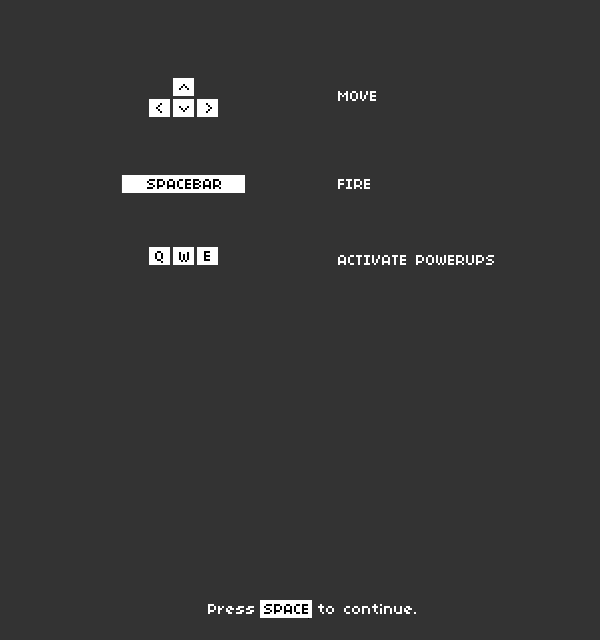
<style>
.page{position:relative;width:600px;height:640px;background:#333333}
.page>*{position:absolute;margin:0}
.t1{font:16px "04b03";color:#000000}
.t2{font:16px "04b03";color:#ffffff}
</style>
<div class="page">
<p class="t1" style="left:179px;top:84px;width:10px;height:6px;rotate:-90deg">&gt;</p>
<p class="t2" style="left:338px;top:91px;width:38px;height:10px">MOVE</p>
<p class="t1" style="left:156px;top:103px;width:6px;height:10px;rotate:180deg">&gt;</p>
<p class="t1" style="left:179px;top:106px;width:10px;height:6px;rotate:90deg">&gt;</p>
<p class="t1" style="left:206px;top:103px;width:6px;height:10px">&gt;</p>
<p class="t1" style="left:147px;top:179px;width:74px;height:10px">SPACEBAR</p>
<p class="t2" style="left:338px;top:179px;width:32px;height:10px">FIRE</p>
<p class="t1" style="left:155px;top:251px;width:8px;height:12px">Q</p>
<p class="t1" style="left:179px;top:252px;width:10px;height:10px">W</p>
<p class="t1" style="left:204px;top:251px;width:6px;height:10px">E</p>
<p class="t2" style="left:338px;top:255px;width:156px;height:10px">ACTIVATE POWERUPS</p>
<p class="t2" style="left:208px;top:604px;width:208px;height:10px">Press <span class="t1">SPACE </span>to continue.</p>
</div>
